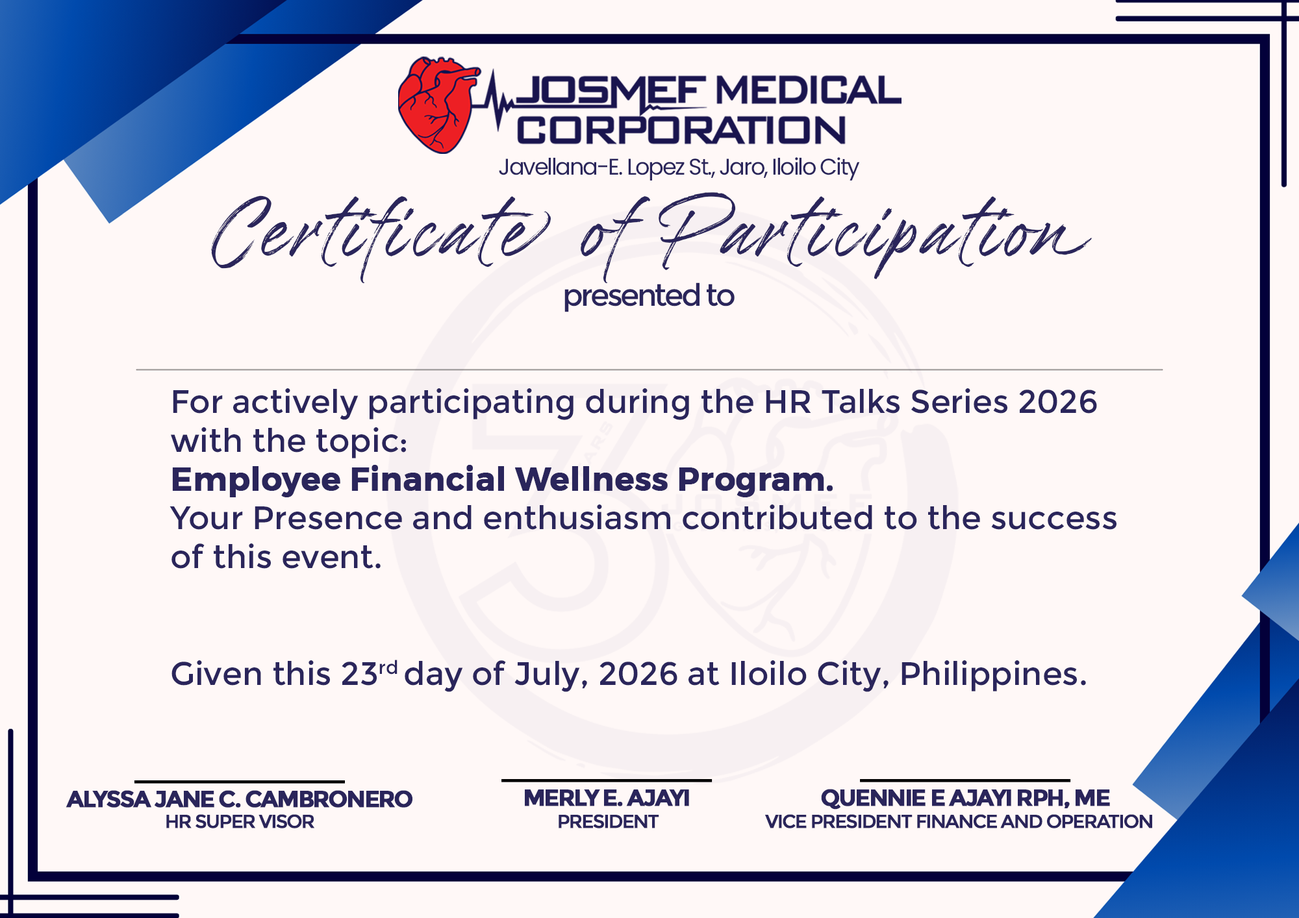
<style>
.page{position:relative;width:1299px;height:918px;background:#fff8f7}
.page>*{position:absolute;margin:0}
.t1{font:22.8px "Poppins-Regular";letter-spacing:-0.06em;color:#2a255b}
.t2{font:86.4px "Brushwell";letter-spacing:0.06em;color:#2a255b}
.t3{font:30.8px "Montserrat-Regular";letter-spacing:-0.08em;color:#2a255b}
.t4{font:32.4px "Montserrat-Regular";color:#2a255b}
.t5{font:32.4px "Montserrat-SemiBold";color:#2a255b;font-weight:bold}
.t6{font:23.3px "Montserrat-Bold";letter-spacing:-0.08em;color:#2a255b;text-transform:uppercase;font-weight:bold}
.t7{font:18.6px "Montserrat-Regular";letter-spacing:-0.08em;color:#2a255b;text-transform:uppercase;font-weight:bold}
</style>
<div class="page">
<p class="t1" style="left:499px;top:157px;width:361px;height:24px">Javellana-E. Lopez St., Jaro, Iloilo City</p>
<p class="t2" style="left:211px;top:192px;width:881px;height:92px">Certificate of Participation</p>
<p class="t3" style="left:564px;top:282px;width:170px;height:30px">presented to</p>
<p class="t4" style="left:169px;top:388px;width:947px;height:304px">For actively participating during the HR Talks Series 2026 with the topic:<br><span class="t5">Employee Financial Wellness Program.<br></span>Your Presence and enthusiasm contributed to the success of this event.<br><br><br>Given this 23rd day of July, 2026 at Iloilo City, Philippines.</p>
<p class="t6" style="left:66px;top:790px;width:346px;height:18px">alyssa jane c. cambronero</p>
<p class="t6" style="left:525px;top:790px;width:164px;height:16px">merly E. Ajayi</p>
<p class="t6" style="left:821px;top:789px;width:289px;height:21px">Quennie E Ajayi rph, me</p>
<p class="t7" style="left:166px;top:814px;width:148px;height:15px">hr super visor</p>
<p class="t7" style="left:558px;top:814px;width:101px;height:15px">President</p>
<p class="t7" style="left:765px;top:814px;width:387px;height:15px">vice president finance and operation</p>
</div>
